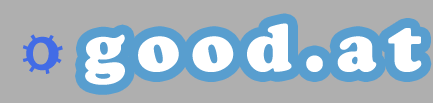
<style>
.page{position:relative;width:433px;height:103px;background:#afafaf}
.page>*{position:absolute;margin:0}
.t1{font:71px "CooperBlack";letter-spacing:0.165em;color:#ffffff}
.t2{font:71px "Jokerman-Regular";letter-spacing:-0.655em;color:#426ce6}
</style>
<div class="page">
<p class="t1" style="left:85px;top:23px;width:337px;height:62px">good.at</p>
<p class="t2" style="left:22px;top:34px;width:41px;height:40px">o</p>
</div>
